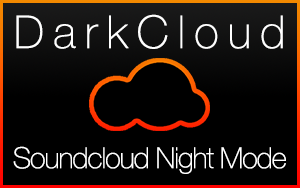
<style>
.page{position:relative;width:300px;height:188px;background:#000000}
.page>*{position:absolute;margin:0}
.t1{font:45.3px "HelveticaNeueCE-Thin";letter-spacing:0.2em;color:#ffffff}
.t2{font:29.2px "HelveticaNeueCE-Thin";letter-spacing:-0.04em;color:#ffffff}
</style>
<div class="page">
<p class="t1" style="left:16px;top:14px;width:267px;height:35px">DarkCloud</p>
<p class="t2" style="left:13px;top:146px;width:273px;height:28px">Soundcloud Night Mode</p>
</div>
